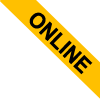
<style>
.page{position:relative;width:100px;height:100px;background:#ffffff}
.page>*{position:absolute;margin:0}
.t1{font:21.6px "Arial-BoldMT";color:#000000;text-transform:uppercase;scale:0.95 1}
</style>
<div class="page">
<p class="t1" style="left:29px;top:12px;width:64px;height:63px;rotate:44deg">Online</p>
</div>
